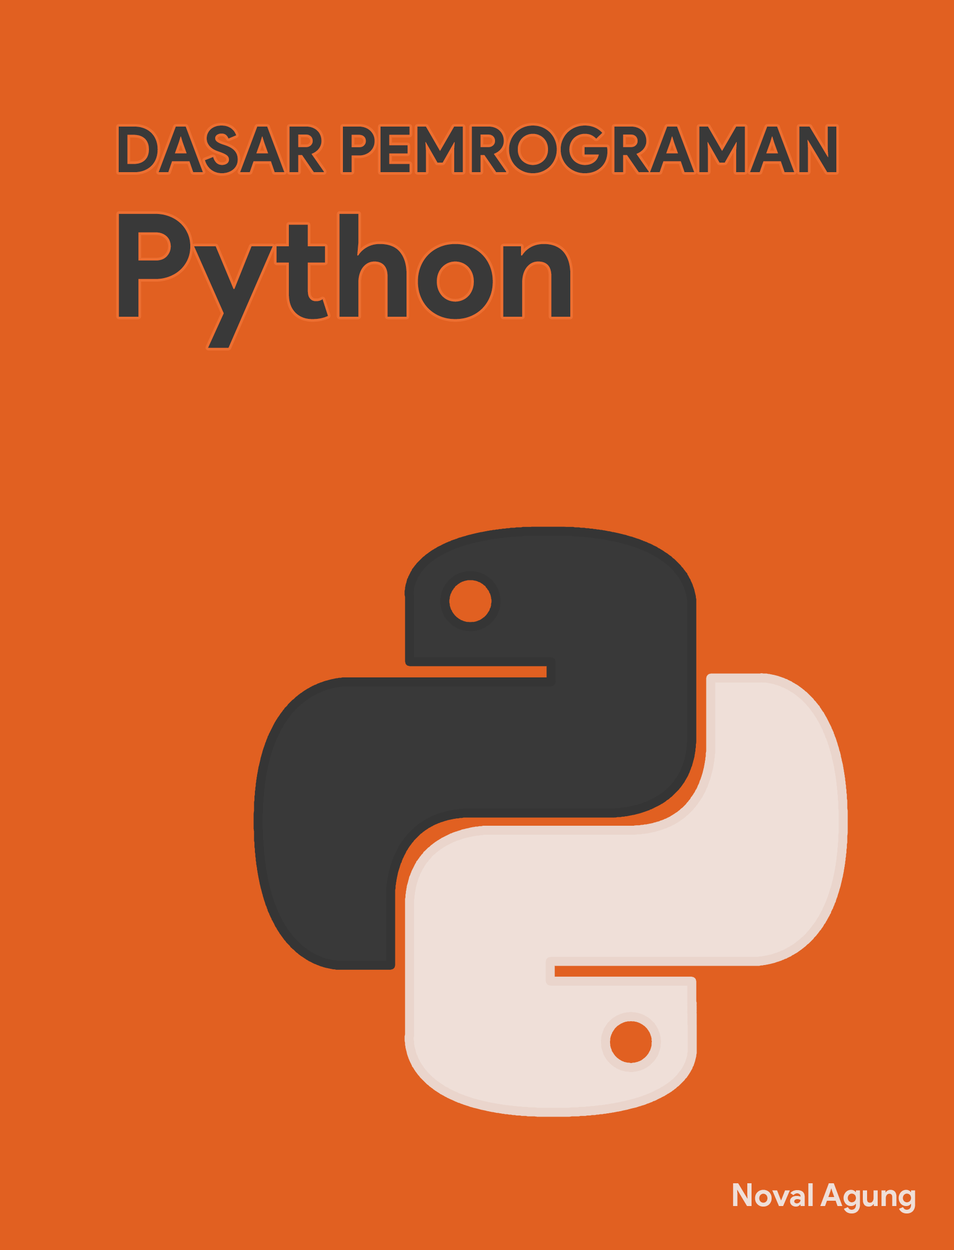
<style>
.page{position:relative;width:954px;height:1250px;background:#e16021}
.page>*{position:absolute;margin:0}
.t1{font:63.6px "ProductSans-Bold";color:#393939}
.t2{font:143.6px "ProductSans-Bold";color:#393939}
.t3{font:31.8px "ProductSans-Bold";color:#efdfd8}
</style>
<div class="page">
<p class="t1" style="left:119px;top:126px;width:717px;height:47px">DASAR PEMROGRAMAN</p>
<p class="t2" style="left:119px;top:214px;width:451px;height:134px">Python</p>
<p class="t3" style="left:733px;top:1184px;width:182px;height:30px">Noval Agung</p>
</div>
